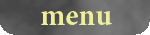
<style>
.page{position:relative;width:150px;height:35px}
.page>*{position:absolute;margin:0}
.t1{font:30px "MinionPro-Bold";color:#eeed9b}
</style>
<div class="page">
<p class="t1" style="left:41px;top:11px;width:71px;height:15px">menu</p>
</div>
